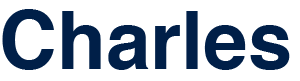
<style>
.page{position:relative;width:300px;height:81px;background:#ffffff}
.page>*{position:absolute;margin:0}
.t1{font:80px "Helvetica-Bold";color:#001f48}
</style>
<div class="page">
<p class="t1" style="left:2px;top:9px;width:288px;height:61px">Charles</p>
</div>
